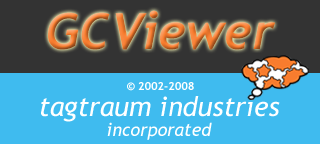
<style>
.page{position:relative;width:320px;height:144px;background:#3fbbef}
.page>*{position:absolute;margin:0}
.t1{font:50px "Trebuchet-BoldItalic"}
.t2{font:11.2px "TrebuchetMS-Bold";color:#ffffff}
.t3{font:27px/20px "TrebuchetMS-Italic";color:#ffffff}
.t4{font:18px/20px "TrebuchetMS-Italic";color:#ffffff}
</style>
<div class="page">
<p class="t1" style="left:48px;top:10px;width:227px;height:40px">GCViewer</p>
<p class="t2" style="left:127px;top:82px;width:67px;height:9px">© 2002-2008</p>
<p class="t3" style="left:41px;top:96px;width:239px;height:44px;text-align:center">tagtraum industries<br><span class="t4">incorporated</span></p>
</div>
